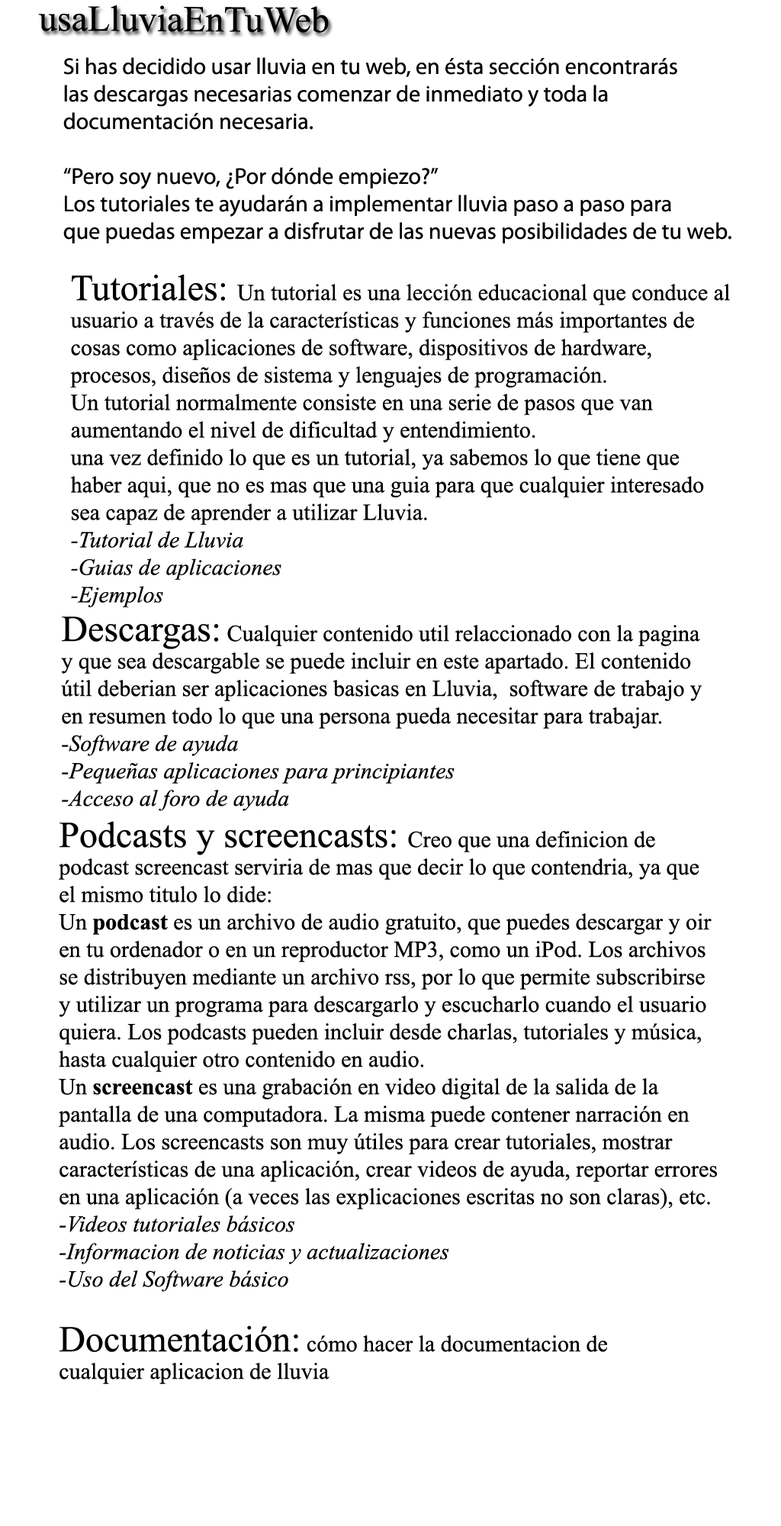
<style>
.page{position:relative;width:781px;height:1526px;background:#ffffff}
.page>*{position:absolute;margin:0}
.t1{font:36.6px "TimesNewRomanPSMT";color:#000000}
.t2{font:22.9px "MyriadPro-Regular";color:#000000}
.t3{font:22.9px "TimesNewRomanPSMT";color:#000000}
.t4{font:22.9px "TimesNewRomanPS-ItalicMT";color:#000000}
.t5{font:22.9px "TimesNewRomanPS-BoldMT";color:#000000}
</style>
<div class="page">
<p class="t1" style="left:38px;top:5px;width:291px;height:28px">usaLluviaEnTuWeb</p>
<p class="t2" style="left:63px;top:57px;width:669px;height:186px">Si has decidido usar lluvia en tu web, en ésta sección encontrarás<br>las descargas necesarias comenzar de inmediato y toda la<br>documentación necesaria.<br><br>“Pero soy nuevo, ¿Por dónde empiezo?”<br>Los tutoriales te ayudarán a implementar lluvia paso a paso para<br>que puedas empezar a disfrutar de las nuevas posibilidades de tu web.</p>
<p class="t3" style="left:70px;top:274px;width:660px;height:333px"><span class="t1">Tutoriales: </span>Un tutorial es una lección educacional que conduce al usuario a través de la características y funciones más importantes de cosas como aplicaciones de software, dispositivos de hardware, procesos, diseños de sistema y lenguajes de programación.<br>Un tutorial normalmente consiste en una serie de pasos que van aumentando el nivel de dificultad y entendimiento.<br>una vez definido lo que es un tutorial, ya sabemos lo que tiene que haber aqui, que no es mas que una guia para que cualquier interesado sea capaz de aprender a utilizar Lluvia.<br><span class="t4">-Tutorial de Lluvia<br>-Guias de aplicaciones<br>-Ejemplos</span></p>
<p class="t3" style="left:61px;top:617px;width:641px;height:194px"><span class="t1">Descargas:</span> Cualquier contenido util relaccionado con la pagina y que sea descargable se puede incluir en este apartado. El contenido útil deberian ser aplicaciones basicas en Lluvia,  software de trabajo y en resumen todo lo que una persona pueda necesitar para trabajar.<br><span class="t4">-Software de ayuda<br>-Pequeñas aplicaciones para principiantes<br>-Acceso al foro de ayuda</span></p>
<p class="t3" style="left:59px;top:821px;width:658px;height:471px"><span class="t1">Podcasts y screencasts: </span>Creo que una definicion de podcast screencast serviria de mas que decir lo que contendria, ya que el mismo titulo lo dide:<br>Un <span class="t5">podcast </span>es un archivo de audio gratuito, que puedes descargar y oir en tu ordenador o en un reproductor MP3, como un iPod. Los archivos se distribuyen mediante un archivo rss, por lo que permite subscribirse y utilizar un programa para descargarlo y escucharlo cuando el usuario quiera. Los podcasts pueden incluir desde charlas, tutoriales y música, hasta cualquier otro contenido en audio.<br>Un<span class="t5"> screencast</span> es una grabación en video digital de la salida de la pantalla de una computadora. La misma puede contener narración en audio. Los screencasts son muy útiles para crear tutoriales, mostrar características de una aplicación, crear videos de ayuda, reportar errores en una aplicación (a veces las explicaciones escritas no son claras), etc.<br><span class="t4">-Videos tutoriales básicos<br>-Informacion de noticias y actualizaciones<br>-Uso del Software básico</span></p>
<p class="t3" style="left:60px;top:1325px;width:547px;height:59px"><span class="t1">Documentación:</span> cómo hacer la documentacion de cualquier aplicacion de lluvia</p>
</div>
